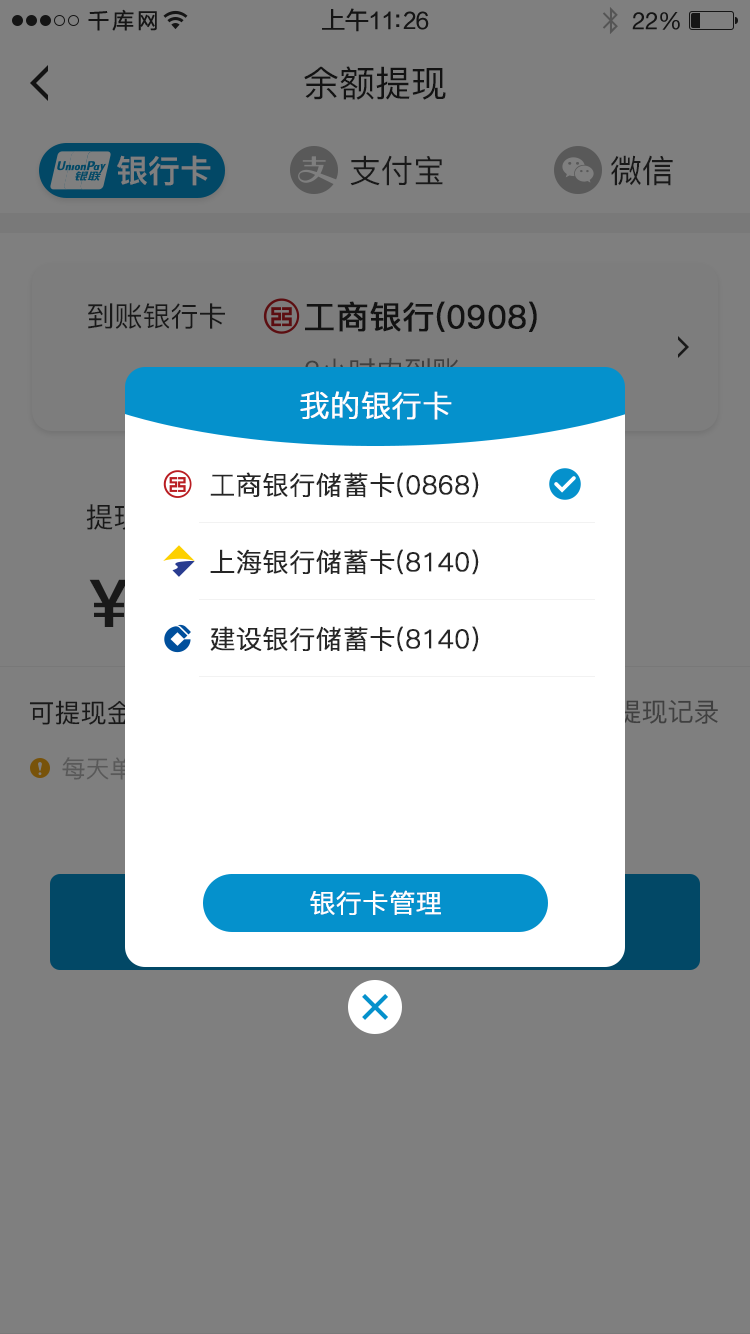
<style>
.page{position:relative;width:750px;height:1334px;background:#7f7f7f}
.page>*{position:absolute;margin:0}
.t1{font:22px "FZLTHK--GBK1-0";letter-spacing:0.12em;color:#151515}
.t2{font:22px "FZLTHK--GBK1-0";letter-spacing:-0.02em;color:#151515}
.t3{font:24px "FZLTHK--GBK1-0";letter-spacing:-0.02em;color:#151515}
.t4{font:24px "HelveticaNeue";letter-spacing:-0.02em;color:#151515}
.t5{font:36px "PingFang-SC-Medium";color:#262626}
.t6{font:32px "PingFang-SC-Heavy";color:#7f7f7f}
.t7{font:32px "PingFang-SC-Medium";color:#191919}
.t8{font:28px "PingFang-SC-Medium";color:#191919}
.t9{font:32px "PingFang-SC-Medium";color:#262626;font-weight:bold}
.t10{font:30px "PingFang-SC-Regular";color:#fffefe;font-weight:bold}
.t11{font:26px "PingFang-SC-Regular";color:#262626;font-weight:bold}
.t12{font:66px "PingFang-SC-Heavy";color:#191919}
.t13{font:26px "PingFang-SC-Medium";color:#191919}
.t14{font:26px "PingFang-SC-Medium";color:#404040}
.t15{font:26px "PingFang-SC-Regular";color:#ffffff;font-weight:bold}
</style>
<div class="page">
<p class="t1" style="left:88px;top:9px;width:69px;height:22px">千库网</p>
<p class="t2" style="left:322px;top:8px;width:107px;height:24px"><span class="t3">上午</span>11:26</p>
<p class="t4" style="left:632px;top:12px;width:48px;height:18px">22%</p>
<p class="t5" style="left:304px;top:66px;width:142px;height:34px">余额提现</p>
<p class="t6" style="left:117px;top:155px;width:94px;height:31px">银行卡</p>
<p class="t7" style="left:350px;top:155px;width:93px;height:31px">支付宝</p>
<p class="t7" style="left:611px;top:155px;width:62px;height:31px">微信</p>
<p class="t8" style="left:88px;top:303px;width:137px;height:26px">到账银行卡</p>
<p class="t9" style="left:305px;top:301px;width:232px;height:31px">工商银行(0908)</p>
<p class="t10" style="left:300px;top:391px;width:152px;height:29px">我的银行卡</p>
<p class="t11" style="left:210px;top:472px;width:269px;height:26px">工商银行储蓄卡(0868)</p>
<p class="t11" style="left:210px;top:549px;width:269px;height:26px">上海银行储蓄卡(8140)</p>
<p class="t12" style="left:89px;top:579px;width:40px;height:48px">￥</p>
<p class="t11" style="left:210px;top:626px;width:269px;height:26px">建设银行储蓄卡(8140)</p>
<p class="t13" style="left:29px;top:700px;width:138px;height:25px">可提现金额：</p>
<p class="t14" style="left:616px;top:699px;width:102px;height:25px">提现记录</p>
<p class="t15" style="left:310px;top:890px;width:131px;height:25px">银行卡管理</p>
</div>
